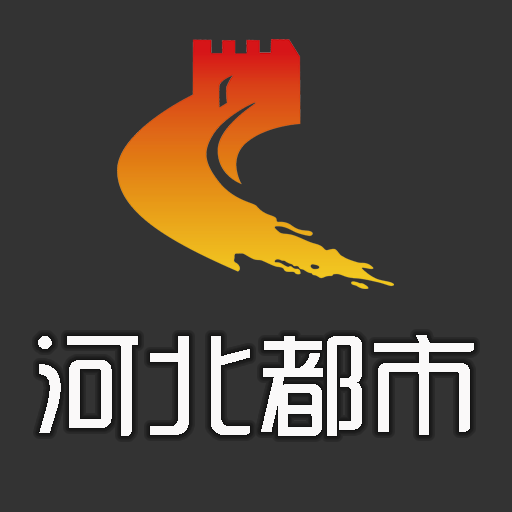
<style>
.page{position:relative;width:512px;height:512px;background:#333333}
.page>*{position:absolute;margin:0}
.t1{font:110px "SJyunlv";letter-spacing:0.02em;color:#faf9f9}
</style>
<div class="page">
<p class="t1" style="left:38px;top:335px;width:436px;height:101px">河北都市</p>
</div>
